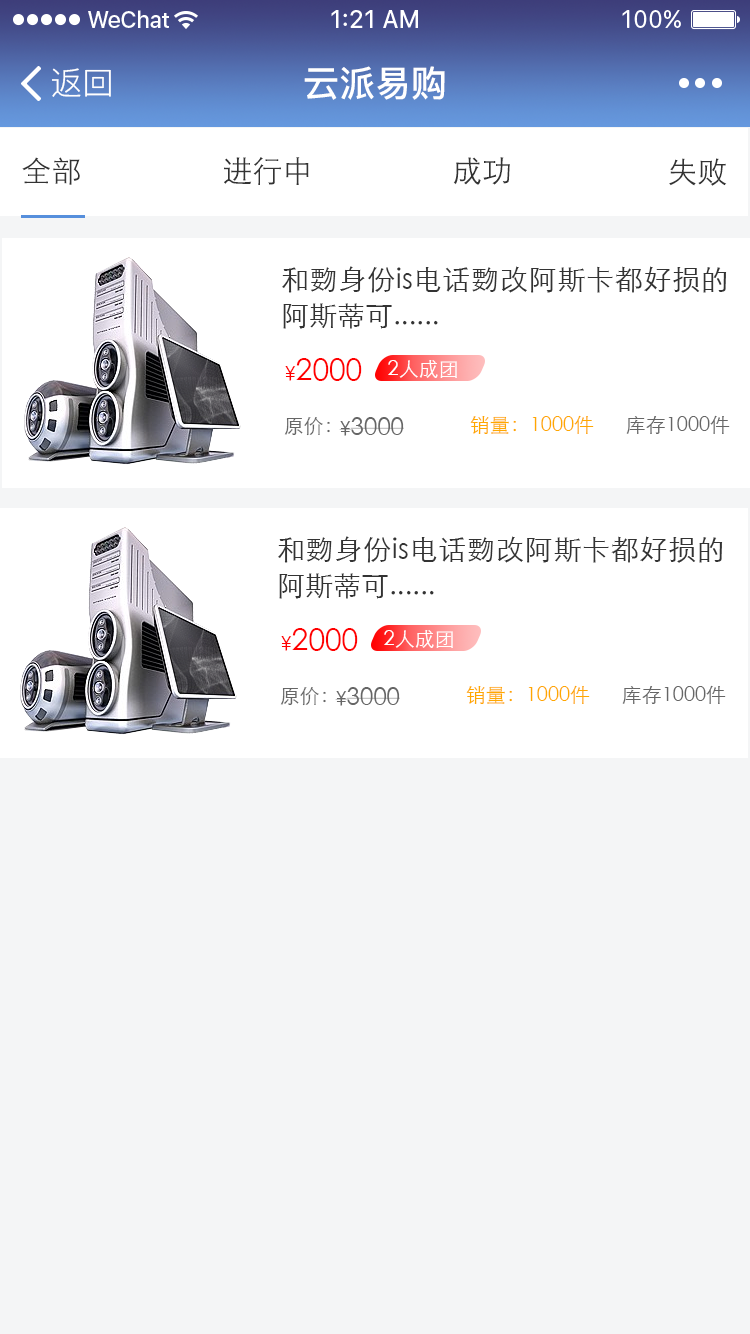
<style>
.page{position:relative;width:750px;height:1334px;background:#f4f5f6}
.page>*{position:absolute;margin:0}
.t1{font:32px "PingFang-SC-Regular";color:#ffffff}
.t2{font:36px "PingFang-SC-Bold";color:#ffffff}
.t3{font:30px "STXihei";color:#333333}
.t4{font:28px/36px "STXihei";color:#333333}
.t5{font:30px "STXihei";color:#ff0000}
.t6{font:20px "STXihei";color:#ff0000}
.t7{font:20px "STXihei";color:#ffffff}
.t8{font:20px "STXihei";color:#666666}
.t9{font:24px "STXihei";color:#666666}
.t10{font:20px "STXihei";color:#ffa800}
</style>
<div class="page">
<p class="t1" style="left:52px;top:68px;width:59px;height:29px">返回</p>
<p class="t2" style="left:304px;top:66px;width:141px;height:34px">云派易购</p>
<p class="t3" style="left:22px;top:157px;width:58px;height:28px">全部</p>
<p class="t3" style="left:224px;top:157px;width:85px;height:28px">进行中</p>
<p class="t3" style="left:453px;top:157px;width:57px;height:28px">成功</p>
<p class="t3" style="left:669px;top:158px;width:58px;height:28px">失败</p>
<p class="t4" style="left:282px;top:266px;width:445px;height:63px;text-align:justify">和覅身份is电话覅改阿斯卡都好损的阿斯蒂可......</p>
<p class="t5" style="left:285px;top:358px;width:77px;height:23px"><span class="t6">¥</span>2000</p>
<p class="t7" style="left:388px;top:360px;width:69px;height:18px">2人成团</p>
<p class="t8" style="left:284px;top:417px;width:46px;height:19px">原价：</p>
<p class="t9" style="left:339px;top:417px;width:65px;height:19px"><span class="t8">¥</span>3000</p>
<p class="t10" style="left:470px;top:415px;width:124px;height:19px">销量：1000件</p>
<p class="t8" style="left:626px;top:415px;width:104px;height:19px">库存1000件</p>
<p class="t4" style="left:278px;top:536px;width:445px;height:63px;text-align:justify">和覅身份is电话覅改阿斯卡都好损的阿斯蒂可......</p>
<p class="t5" style="left:281px;top:628px;width:77px;height:23px"><span class="t6">¥</span>2000</p>
<p class="t7" style="left:384px;top:630px;width:69px;height:18px">2人成团</p>
<p class="t8" style="left:280px;top:687px;width:46px;height:19px">原价：</p>
<p class="t9" style="left:335px;top:687px;width:65px;height:19px"><span class="t8">¥</span>3000</p>
<p class="t10" style="left:466px;top:685px;width:124px;height:19px">销量：1000件</p>
<p class="t8" style="left:622px;top:685px;width:104px;height:19px">库存1000件</p>
</div>
